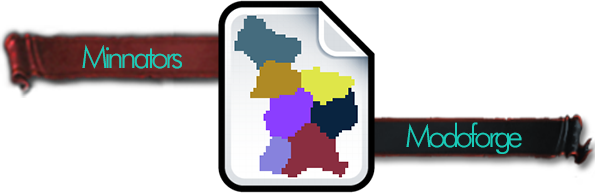
<style>
.page{position:relative;width:595px;height:193px;background:#ffffff}
.page>*{position:absolute;margin:0}
.t1{font:32px "FuturaBT-Light";letter-spacing:-0.12em;color:#19cbb8}
</style>
<div class="page">
<p class="t1" style="left:82px;top:44px;width:100px;height:25px">Minnators</p>
<p class="t1" style="left:406px;top:122px;width:116px;height:32px">Modoforge</p>
</div>
